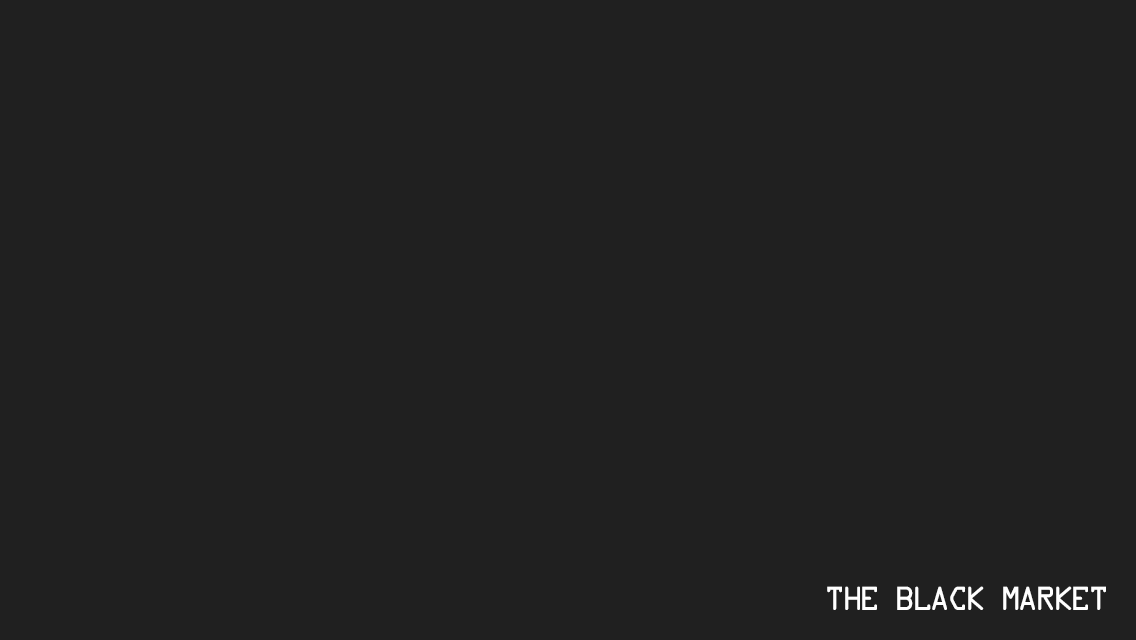
<style>
.page{position:relative;width:1136px;height:640px;background:#202020}
.page>*{position:absolute;margin:0}
.t1{font:36px "DataControl";color:#ffffff}
</style>
<div class="page">
<p class="t1" style="left:827px;top:586px;width:279px;height:24px">The Black Market</p>
</div>
